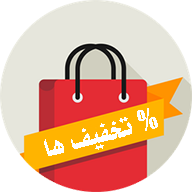
<style>
.page{position:relative;width:192px;height:192px;background:#e6e6dc}
.page>*{position:absolute;margin:0}
.t1{font:27px "Wsamt";color:#ffffff}
.t2{font:27px "Impact";color:#ffffff}
</style>
<div class="page">
<p class="t1" style="left:44px;top:108px;width:114px;height:48px;rotate:-15deg"><span class="t2">% </span>تخفیف ها</p>
</div>
